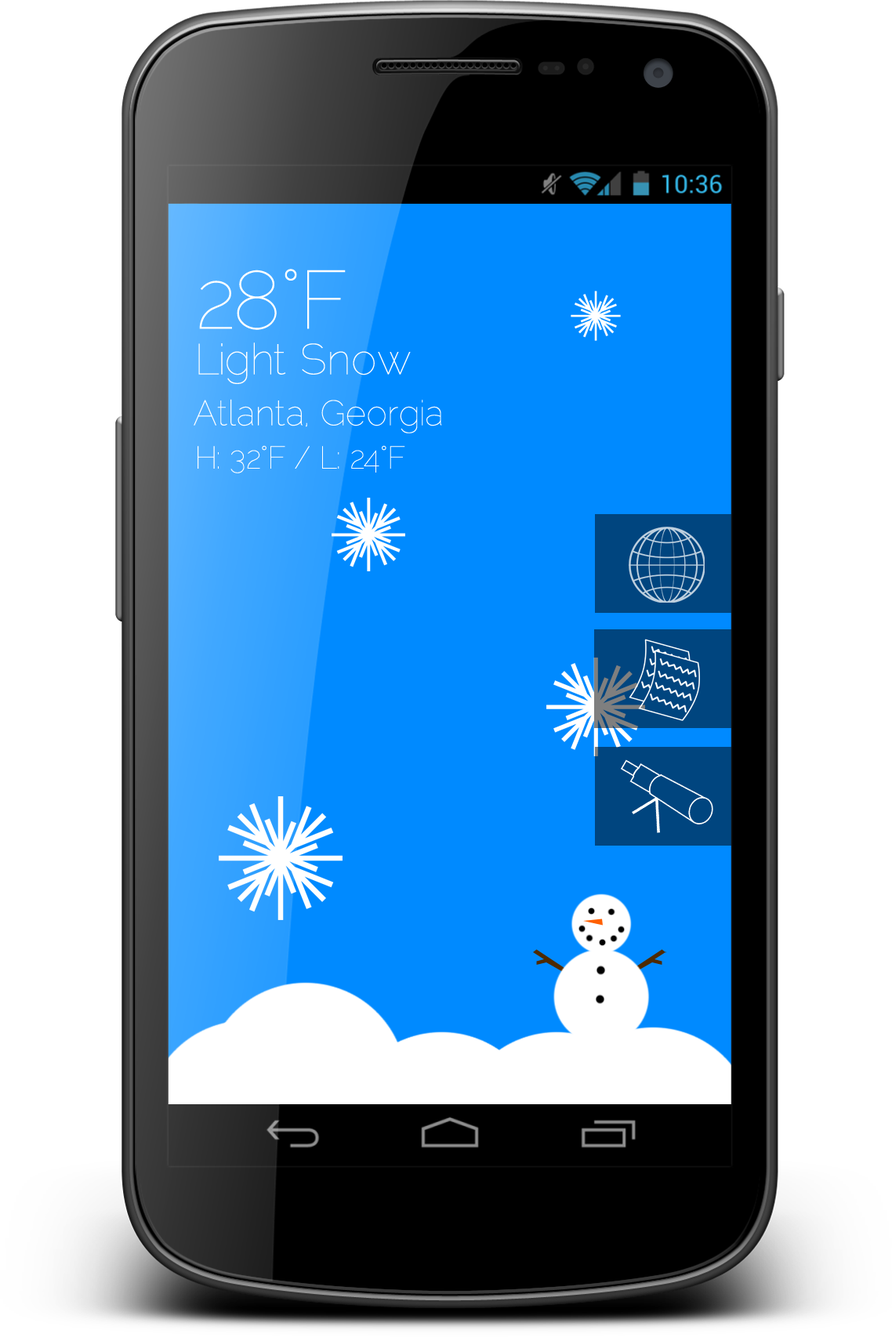
<style>
.page{position:relative;width:892px;height:1337px;background:#ffffff}
.page>*{position:absolute;margin:0}
.t1{font:82.3px "Raleway-Thin";color:#ffffff}
.t2{font:43.1px "Raleway-Thin";color:#fefefe}
.t3{font:35.3px "Raleway-Thin";color:#ffffff}
.t4{font:31.4px "Raleway-Thin";color:#ffffff}
</style>
<div class="page">
<p class="t1" style="left:199px;top:269px;width:147px;height:61px">28°F</p>
<p class="t2" style="left:198px;top:342px;width:213px;height:42px">Light Snow</p>
<p class="t3" style="left:194px;top:399px;width:248px;height:34px">Atlanta, Georgia</p>
<p class="t4" style="left:197px;top:445px;width:208px;height:28px">H: 32°F / L: 24°F</p>
</div>
